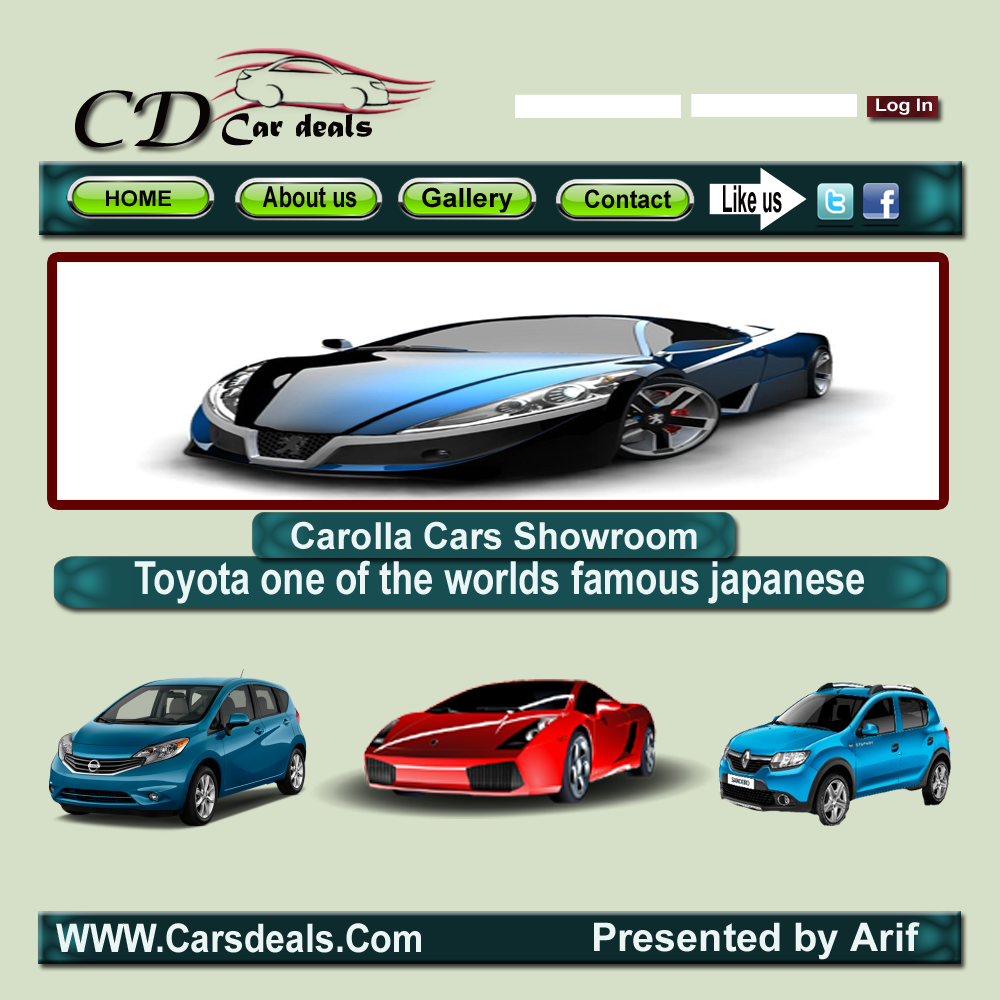
<style>
.page{position:relative;width:1000px;height:1000px;background:#d6dfc7}
.page>*{position:absolute;margin:0}
.t1{font:75.5px "LucidaCalligraphy-Italic";color:#090404;scale:1.16 1}
.t2{font:17.4px "Arial-BoldMT";color:#ffffff;scale:1.12 1}
.t3{font:35.6px "MaturaMTScriptCapitals";color:#090404}
.t4{font:37.3px "Arial-BoldMT";color:#090404;scale:0.47 1}
.t5{font:21.5px "Arial-BoldMT";color:#090404;scale:1.05 1}
.t6{font:29px "Arial-BoldMT";color:#090404;scale:0.75 1}
.t7{font:26.6px "Arial-BoldMT";color:#090404}
.t8{font:25.4px "Arial-BoldMT";color:#090404;scale:0.92 1}
.t9{font:37.3px "Arial-BoldMT";color:#ecf5f6;scale:0.97 1}
.t10{font:45.5px "Arial-BoldMT";color:#ecf5f6;scale:0.8 1}
.t11{font:39.5px "Arial-BoldMT";color:#ecf5f6;scale:0.9 1}
.t12{font:39.5px "Arial-BoldMT";color:#ecf5f6}
</style>
<div class="page">
<p class="t1" style="left:75px;top:90px;width:135px;height:58px">CD</p>
<p class="t2" style="left:876px;top:98px;width:56px;height:17px">Log In</p>
<p class="t3" style="left:222px;top:113px;width:150px;height:33px">Car deals</p>
<p class="t4" style="left:723px;top:185px;width:59px;height:28px">Like us</p>
<p class="t5" style="left:106px;top:190px;width:65px;height:17px">HOME</p>
<p class="t6" style="left:262px;top:186px;width:95px;height:22px">About us</p>
<p class="t7" style="left:422px;top:187px;width:91px;height:26px">Gallery</p>
<p class="t8" style="left:585px;top:189px;width:86px;height:20px">Contact</p>
<p class="t9" style="left:291px;top:521px;width:406px;height:29px">Carolla Cars Showroom</p>
<p class="t10" style="left:134px;top:560px;width:730px;height:44px">Toyota one of the worlds famous japanese</p>
<p class="t11" style="left:56px;top:923px;width:365px;height:30px">WWW.Carsdeals.Com</p>
<p class="t12" style="left:594px;top:922px;width:326px;height:38px">Presented by Arif</p>
</div>
